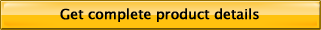
<style>
.page{position:relative;width:321px;height:30px;background:#ffc20e}
.page>*{position:absolute;margin:0}
.t1{font:14px "LucidaSansUnicode";letter-spacing:-0.02em;color:#000000;font-weight:bold}
</style>
<div class="page">
<p class="t1" style="left:60px;top:8px;width:199px;height:14px">Get complete product details</p>
</div>
